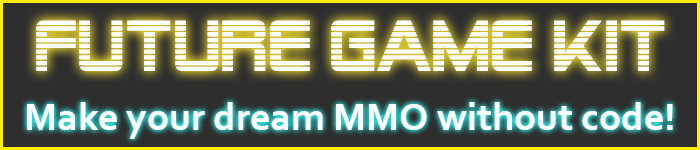
<style>
.page{position:relative;width:700px;height:150px;background:#2e2e2e}
.page>*{position:absolute;margin:0}
.t1{font:72px "AlienEncounters";color:#ffffff}
.t2{font:40px "Corbel-Bold";color:#ffffff}
</style>
<div class="page">
<p class="t1" style="left:36px;top:20px;width:629px;height:51px">Future Game kit</p>
<p class="t2" style="left:27px;top:102px;width:646px;height:37px">Make your dream MMO without code!</p>
</div>
